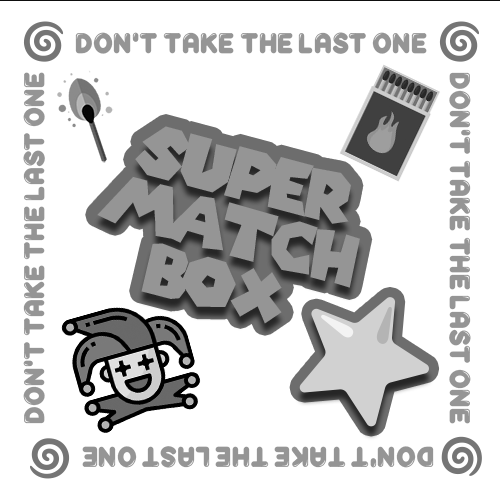
<style>
.page{position:relative;width:500px;height:500px;background:#ffffff}
.page>*{position:absolute;margin:0}
.t1{font:36.5px "Reglisse-Fill";letter-spacing:-0.02em;color:#959595}
.t2{font:36.5px "NotoColorEmoji-SVG";letter-spacing:-0.02em;color:#959595}
</style>
<div class="page">
<p class="t1" style="left:23px;top:20px;width:456px;height:41px"><span class="t2">🌀</span>  don’t take the last one  <span class="t2">🌀</span></p>
<p class="t1" style="left:23px;top:71px;width:22px;height:352px;rotate:-90deg">don’t take the last one</p>
<p class="t1" style="left:441px;top:71px;width:41px;height:404px;rotate:90deg">don’t take the last one  <span class="t2">🌀</span></p>
<p class="t1" style="left:30px;top:437px;width:404px;height:41px;rotate:-180deg">don’t take the last one  <span class="t2">🌀</span></p>
</div>
